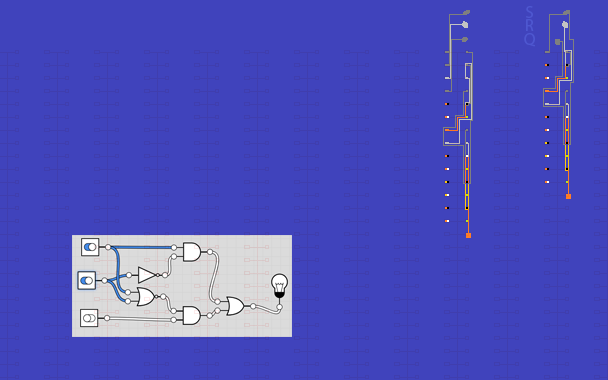
<style>
.page{position:relative;width:608px;height:380px;background:#4043bc}
.page>*{position:absolute;margin:0}
.t1{font:16.7px "MyriadPro-Regular";color:#4e57d0}
</style>
<div class="page">
<p class="t1" style="left:526px;top:6px;width:7px;height:12px">S</p>
<p class="t1" style="left:526px;top:19px;width:8px;height:12px">R</p>
<p class="t1" style="left:524px;top:33px;width:11px;height:14px">Q</p>
</div>
